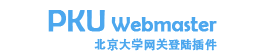
<style>
.page{position:relative;width:266px;height:56px;background:#ffffff}
.page>*{position:absolute;margin:0}
.t1{font:30px "BerlinSansFB-Reg";color:#4ca7ee;font-weight:bold}
.t2{font:21px "BerlinSansFB-Reg";color:#4ca7ee;font-weight:bold}
.t3{font:12px "AdobeHeitiStd-Regular";color:#4ca7ee;font-weight:bold}
</style>
<div class="page">
<p class="t1" style="left:48px;top:10px;width:57px;height:22px">PKU</p>
<p class="t2" style="left:111px;top:17px;width:106px;height:15px">Webmaster</p>
<p class="t3" style="left:94px;top:38px;width:123px;height:13px">北京大学网关登陆插件</p>
</div>
